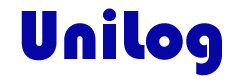
<style>
.page{position:relative;width:250px;height:80px;background:#ffffff}
.page>*{position:absolute;margin:0}
.t1{font:72px "Bauhaus93";color:#0506a4}
</style>
<div class="page">
<p class="t1" style="left:21px;top:8px;width:201px;height:68px">UniLog</p>
</div>
